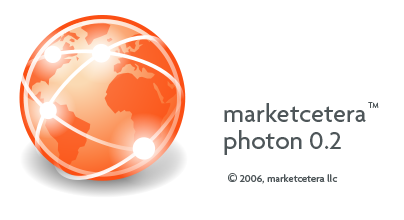
<style>
.page{position:relative;width:404px;height:220px;background:#ffffff}
.page>*{position:absolute;margin:0}
.t1{font:8px "Agenda-Light";color:#4e5659}
.t2{font:26.7px "Agenda-Medium";color:#4e5659}
.t3{font:10.7px "Agenda-Medium";color:#4e5659}
.t4{font:18.7px "Agenda-Medium";color:#4e5659}
</style>
<div class="page">
<p class="t1" style="left:368px;top:102px;width:11px;height:6px">TM</p>
<p class="t2" style="left:224px;top:103px;width:142px;height:52px">marketcetera<br>photon 0.2</p>
<p class="t3" style="left:228px;top:173px;width:110px;height:11px"><span class="t4">©</span> 2006, marketcetera llc</p>
</div>
